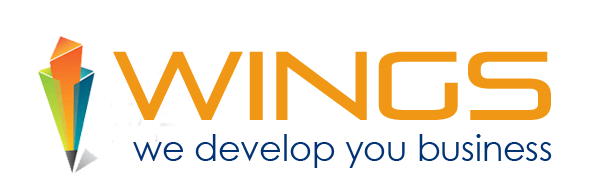
<style>
.page{position:relative;width:600px;height:189px;background:#ffffff}
.page>*{position:absolute;margin:0}
.t1{font:97.1px "PirulenRg-Regular";color:#f09816}
.t2{font:36.2px "CenturyGothic";color:#023475;scale:0.96 1}
</style>
<div class="page">
<p class="t1" style="left:113px;top:37px;width:443px;height:106px">WINGS</p>
<p class="t2" style="left:133px;top:130px;width:419px;height:43px">we develop you business</p>
</div>
